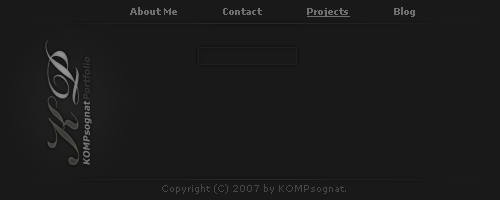
<style>
.page{position:relative;width:500px;height:200px;background:#191919}
.page>*{position:absolute;margin:0}
.t1{font:9px "Verdana-Bold";color:#6f6f6f}
.t2{font:9px "Verdana-Bold";color:#6f6f6f;text-decoration:underline}
.t3{font:72px "BickhamScriptPro-Bold";color:#838383}
.t4{font:9px "Verdana-Bold";color:#353535;font-style:italic}
.t5{font:72px "BickhamScriptPro-Bold";color:#444441}
.t6{font:9px "Verdana-Bold";color:#787878;font-style:italic}
.t7{font:9px "Verdana";color:#474747}
</style>
<div class="page">
<p class="t1" style="left:130px;top:7px;width:285px;height:10px">About Me               Contact               <span class="t2">Projects</span>               Blog</p>
<p class="t3" style="left:45px;top:40px;width:34px;height:65px;rotate:-90deg">P</p>
<p class="t4" style="left:82px;top:56px;width:8px;height:44px;rotate:-90deg">Portfolio</p>
<p class="t5" style="left:47px;top:96px;width:32px;height:69px;rotate:-90deg">K</p>
<p class="t6" style="left:83px;top:100px;width:9px;height:65px;rotate:-90deg">KOMPsognat</p>
<p class="t7" style="left:162px;top:184px;width:184px;height:10px">Copyright (C) 2007 by KOMPsognat.</p>
</div>
